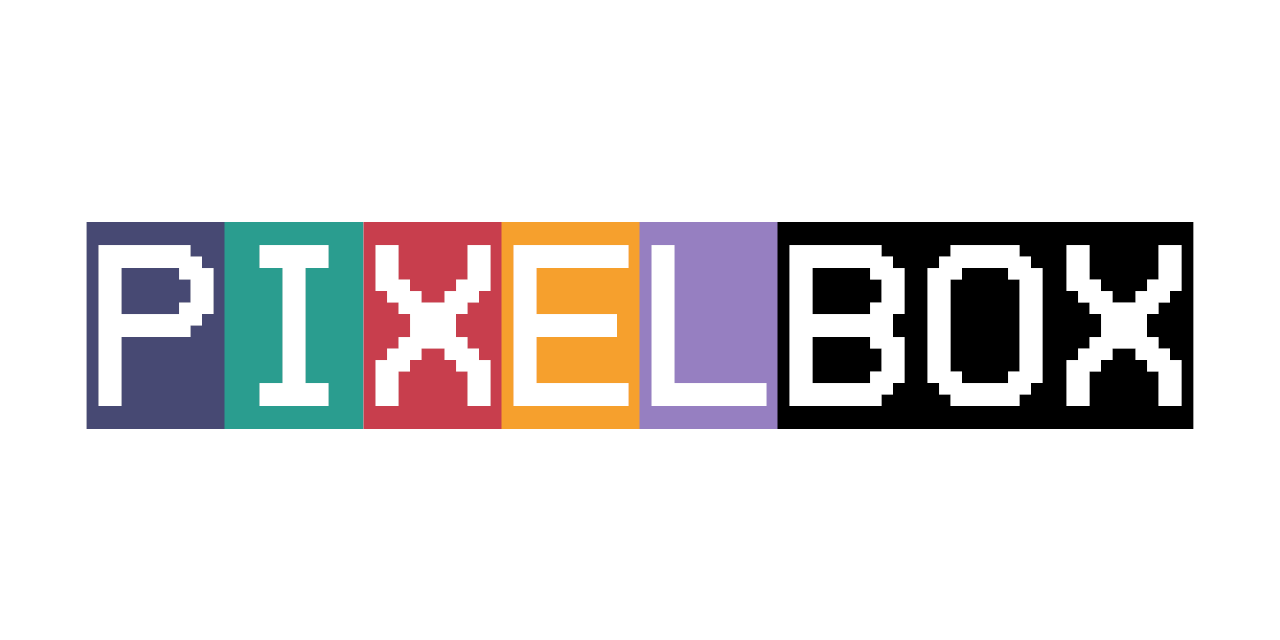
<style>
.page{position:relative;width:1280px;height:640px;background:#ffffff}
.page>*{position:absolute;margin:0}
.t1{font:230.4px "HomeVideo-Bold";color:#000000}
.t2{font:230.4px "HomeVideo-Bold";color:#474973}
.t3{font:230.4px "HomeVideo-Bold";color:#2a9d8f}
.t4{font:230.4px "HomeVideo-Bold";color:#c83e4d}
.t5{font:230.4px "HomeVideo-Bold";color:#f6a02d}
.t6{font:230.4px "HomeVideo-Bold";color:#967fc1}
</style>
<div class="page">
<p class="t1" style="left:86px;top:222px;width:1108px;height:207px"><span class="t2">p</span><span class="t3">i</span><span class="t4">x</span><span class="t5">e</span><span class="t6">l</span>box</p>
</div>
